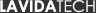
<style>
.page{position:relative;width:96px;height:13px;background:#333333}
.page>*{position:absolute;margin:0}
.t1{font:16px "CenturyGothic-Bold";color:#ffffff}
.t2{font:16px "CenturyGothic";color:#f0f0f0}
</style>
<div class="page">
<p class="t1" style="left:0px;top:0px;width:95px;height:13px">LAVIDA<span class="t2">TECH</span></p>
</div>
